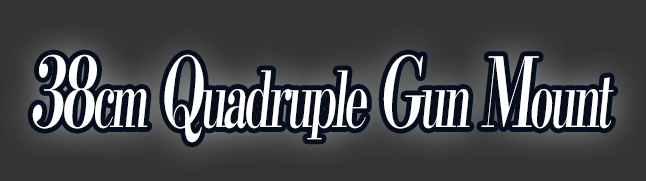
<style>
.page{position:relative;width:646px;height:181px;background:#333333}
.page>*{position:absolute;margin:0}
.t1{font:76.8px "KochoStd-Heavy";letter-spacing:-0.08em;color:#ffffff;font-style:italic;scale:0.57 1}
.t2{font:96px "KochoStd-Heavy";letter-spacing:-0.08em;color:#ffffff;font-style:italic;scale:0.57 1}
</style>
<div class="page">
<p class="t1" style="left:32px;top:54px;width:582px;height:89px"><span class="t2">38</span>cm<span class="t2"> Q</span>uadruple<span class="t2"> G</span>un<span class="t2"> M</span>ount</p>
</div>
